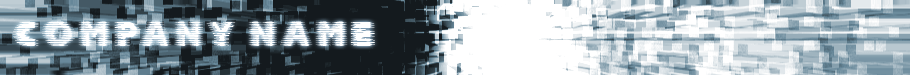
<style>
.page{position:relative;width:910px;height:75px}
.page>*{position:absolute;margin:0}
.t1{font:35px "Halcion";color:#ffffff}
</style>
<div class="page">
<p class="t1" style="left:11px;top:17px;width:419px;height:46px">COMPANY NAME</p>
</div>
